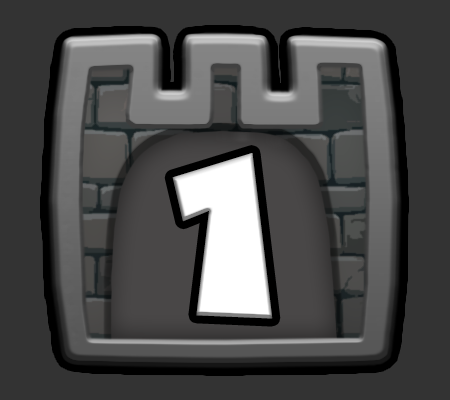
<style>
.page{position:relative;width:450px;height:400px;background:#333333}
.page>*{position:absolute;margin:0}
.t1{font:226.7px "Funhouse";color:#ffffff}
</style>
<div class="page">
<p class="t1" style="left:172px;top:153px;width:101px;height:166px">1</p>
</div>
